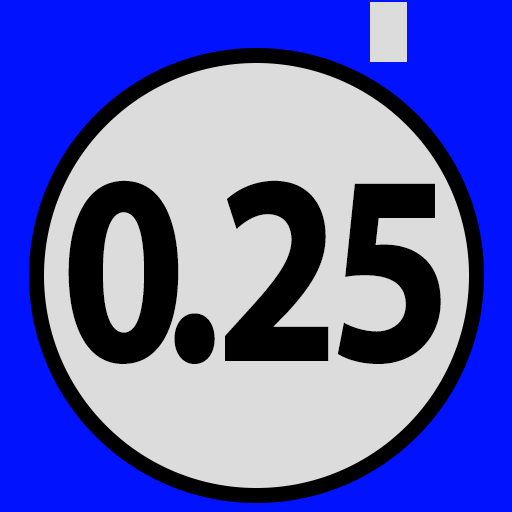
<style>
.page{position:relative;width:512px;height:512px;background:#dcdcdc}
.page>*{position:absolute;margin:0}
.t1{font:272.3px "MyriadPro-Bold";letter-spacing:-0.1em;color:#000000;text-transform:uppercase;scale:0.82 1}
.t2{font:272.3px "MyriadPro-Bold";letter-spacing:-0.025em;color:#000000;text-transform:uppercase;scale:0.82 1}
.t3{font:272.3px "MyriadPro-Bold";letter-spacing:-0.05em;color:#000000;text-transform:uppercase;scale:0.82 1}
.t4{font:272.3px "MyriadPro-Bold";letter-spacing:-0.01em;color:#000000;text-transform:uppercase;scale:0.82 1}
.t5{font:279.7px "MyriadPro-Bold";letter-spacing:-0.05em;color:#000000;text-transform:uppercase;scale:0.8 1}
.t6{font:279.7px "MyriadPro-Bold";letter-spacing:-0.1em;color:#000000;text-transform:uppercase;scale:0.8 1}
.t7{font:279.7px "MyriadPro-Bold";letter-spacing:-0.01em;color:#000000;text-transform:uppercase;scale:0.8 1}
</style>
<div class="page">
<p class="t1" style="left:68px;top:180px;width:373px;height:184px">0<span class="t2">.</span><span class="t3">2</span><span class="t4">5</span></p>
<p class="t5" style="left:72px;top:177px;width:372px;height:189px"><span class="t6">0</span>.5<span class="t7">0</span></p>
</div>
